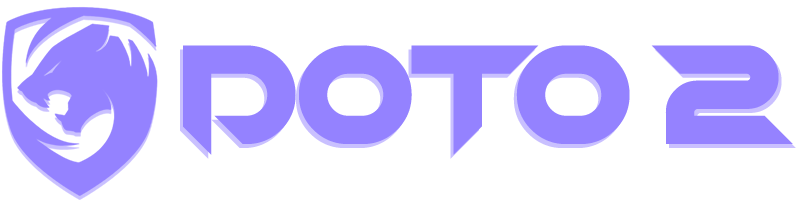
<style>
.page{position:relative;width:800px;height:200px;background:#ffffff}
.page>*{position:absolute;margin:0}
.t1{font:144px "Chopsic";color:#9482ff}
.t2{font:144px "Chopsic";color:#9582ff}
</style>
<div class="page">
<p class="t1" style="left:180px;top:49px;width:447px;height:110px;opacity:0.5">doto</p>
<p class="t1" style="left:183px;top:45px;width:447px;height:110px">doto</p>
<p class="t2" style="left:651px;top:45px;width:142px;height:99px">2</p>
<p class="t2" style="left:654px;top:49px;width:142px;height:99px;opacity:0.5">2</p>
</div>
